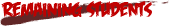
<style>
.page{position:relative;width:169px;height:26px;background:#ffffff}
.page>*{position:absolute;margin:0}
.t1{font:20px "FeastofFleshBB";color:#c00000}
</style>
<div class="page">
<p class="t1" style="left:1px;top:1px;width:152px;height:16px">Remaining Students</p>
</div>
